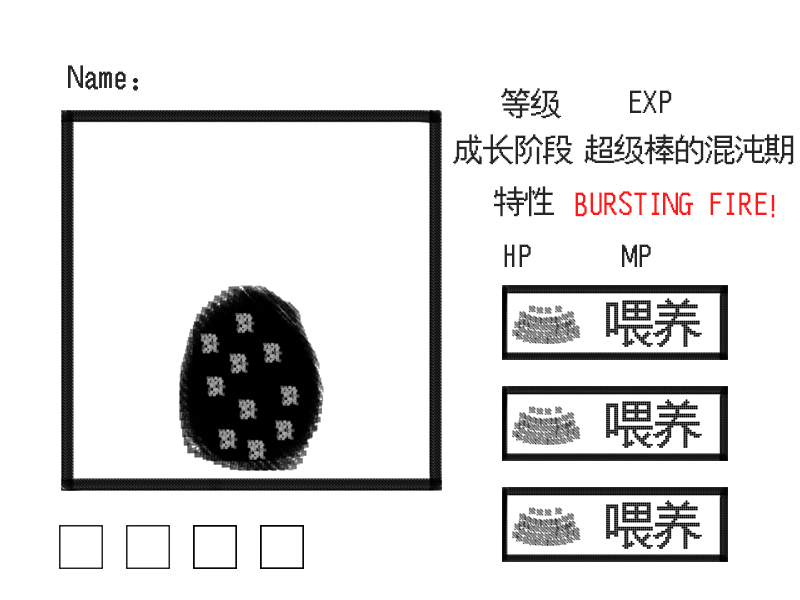
<style>
.page{position:relative;width:800px;height:600px;background:#ffffff}
.page>*{position:absolute;margin:0}
.t1{font:30px "FZXS24--GB1-0";color:#262626}
.t2{font:30px "FZXS24--GB1-0";color:#fe1a1a}
</style>
<div class="page">
<p class="t1" style="left:68px;top:65px;width:70px;height:26px">Name：</p>
<p class="t1" style="left:68px;top:65px;width:70px;height:26px">Name：</p>
<p class="t1" style="left:501px;top:88px;width:60px;height:31px">等级</p>
<p class="t1" style="left:630px;top:90px;width:42px;height:23px">EXP</p>
<p class="t1" style="left:453px;top:134px;width:120px;height:31px">成长阶段</p>
<p class="t1" style="left:584px;top:134px;width:210px;height:31px">超级棒的混沌期</p>
<p class="t1" style="left:494px;top:186px;width:60px;height:31px">特性</p>
<p class="t2" style="left:575px;top:191px;width:200px;height:27px">BURSTING FIRE!</p>
<p class="t1" style="left:504px;top:244px;width:27px;height:23px">HP</p>
<p class="t1" style="left:622px;top:244px;width:29px;height:23px">MP</p>
</div>
